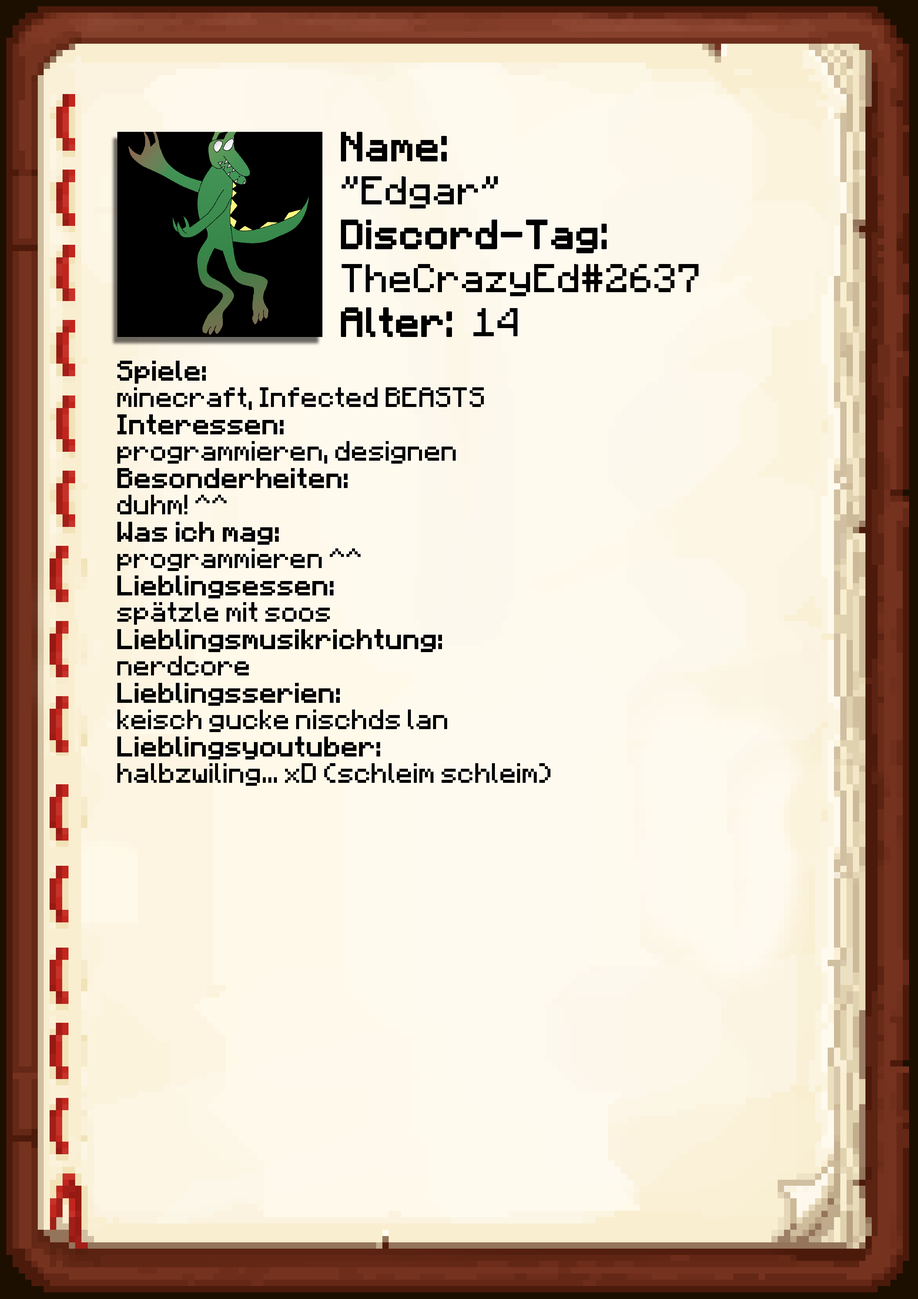
<style>
.page{position:relative;width:918px;height:1299px}
.page>*{position:absolute;margin:0}
.t1{font:40.1px/43.9px "Minecraft-Regular";color:#000000}
.t2{font:40.1px/43.9px "Minecraft-Regular";color:#000000;font-weight:bold}
.t3{font:22.4px "Minecraft";color:#000000}
.t4{font:22.4px "Minecraft";color:#000000;font-weight:bold}
</style>
<div class="page">
<p class="t1" style="left:341px;top:132px;width:358px;height:205px"><span class="t2">Name:<br></span>"Edgar"<br><span class="t2">Discord-Tag:<br></span>TheCrazyEd#2637<br><span class="t2">Alter: </span>14</p>
<p class="t3" style="left:117px;top:361px;width:434px;height:425px"><span class="t4">Spiele: <br></span>minecraft, Infected BEASTS<br><span class="t4">Interessen:<br></span>programmieren, designen<br><span class="t4">Besonderheiten:<br></span>duhm! ^^<br><span class="t4">Was ich mag:<br></span>programmieren ^^<br><span class="t4">Lieblingsessen:<br></span>spätzle mit soos<br><span class="t4">Lieblingsmusikrichtung:<br></span>nerdcore<br><span class="t4">Lieblingsserien:<br></span>keisch gucke nischds lan<br><span class="t4">Lieblingsyoutuber:<br></span>halbzwiling... xD (schleim schleim)</p>
</div>
